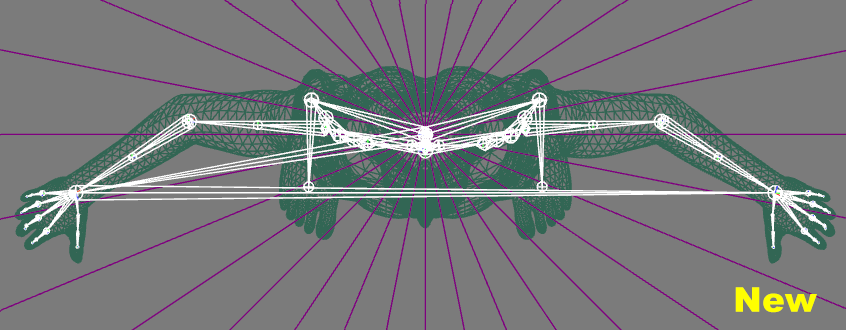
<style>
.page{position:relative;width:846px;height:330px;background:#7b7b7b}
.page>*{position:absolute;margin:0}
.t1{font:34.3px "Arial-Black";color:#ffff00}
</style>
<div class="page">
<p class="t1" style="left:735px;top:287px;width:82px;height:26px">New</p>
</div>
